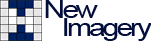
<style>
.page{position:relative;width:151px;height:41px;background:#ffffff}
.page>*{position:absolute;margin:0}
.t1{font:25px "ArialMT";letter-spacing:-0.1em;color:#030f3a;scale:1.2 1}
</style>
<div class="page">
<p class="t1" style="left:45px;top:0px;width:53px;height:18px">New</p>
<p class="t1" style="left:64px;top:18px;width:88px;height:23px">Imagery</p>
</div>
